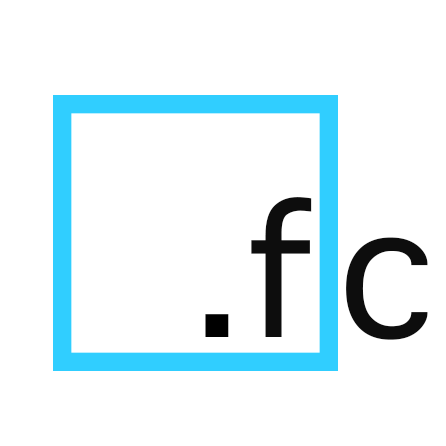
<style>
.page{position:relative;width:446px;height:446px;background:#ffffff}
.page>*{position:absolute;margin:0}
.t1{font:250px "AppleSymbols";color:#0d0d0d}
.t2{font:250px "AppleSymbols";color:#000000}
</style>
<div class="page">
<p class="t1" style="left:205px;top:197px;width:223px;height:143px"><span class="t2">.</span>f   c</p>
</div>
